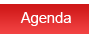
<style>
.page{position:relative;width:89px;height:40px;background:#ffffff}
.page>*{position:absolute;margin:0}
.t1{font:14.7px "ArialMT";color:#ffffff}
</style>
<div class="page">
<p class="t1" style="left:20px;top:12px;width:51px;height:14px">Agenda</p>
</div>
